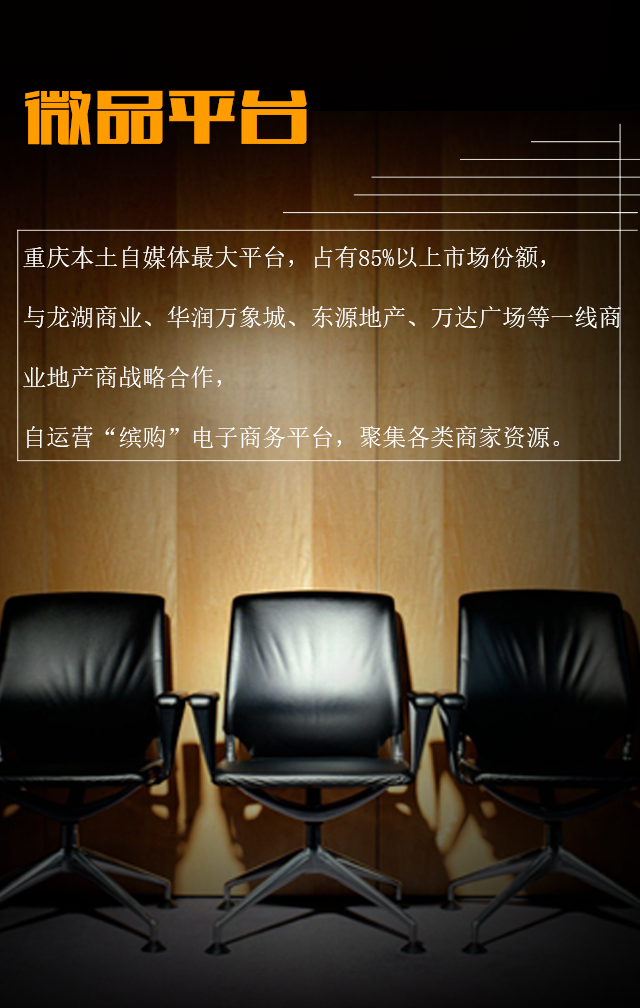
<style>
.page{position:relative;width:640px;height:1008px}
.page>*{position:absolute;margin:0}
.t1{font:24px/60px "SimSun";color:#ffffff}
.t2{font:72px/82px "FZCTHJW--GB1-0";color:#ff9c00}
</style>
<div class="page">
<p class="t1" style="left:23px;top:90px;width:598px;height:358px"><span class="t2">微品平台<br><br></span>重庆本土自媒体最大平台，占有85%以上市场份额，<br>与龙湖商业、华润万象城、东源地产、万达广场等一线商业地产商战略合作，<br>自运营“缤购”电子商务平台，聚集各类商家资源。</p>
</div>
